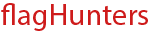
<style>
.page{position:relative;width:150px;height:32px;background:#ffffff}
.page>*{position:absolute;margin:0}
.t1{font:30.5px "MyriadPro-Regular";color:#ce1b1b}
</style>
<div class="page">
<p class="t1" style="left:1px;top:3px;width:147px;height:28px">flagHunters</p>
</div>
